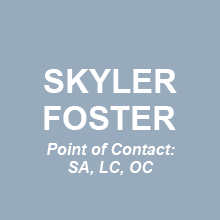
<style>
.page{position:relative;width:220px;height:220px;background:#98abbc}
.page>*{position:absolute;margin:0}
.t1{font:33px "Arial-BoldMT";color:#ffffff}
.t2{font:16px "Arial-BoldItalicMT";color:#ffffff}
</style>
<div class="page">
<p class="t1" style="left:44px;top:69px;width:133px;height:24px">SKYLER</p>
<p class="t1" style="left:44px;top:106px;width:132px;height:24px">FOSTER</p>
<p class="t2" style="left:47px;top:143px;width:128px;height:12px">Point of Contact:</p>
<p class="t2" style="left:68px;top:161px;width:86px;height:14px">SA, LC, OC</p>
</div>
